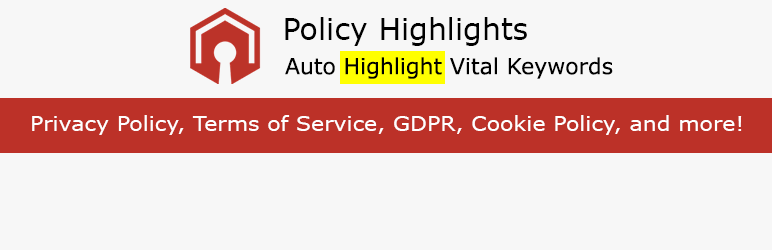
<style>
.page{position:relative;width:772px;height:250px;background:#f7f7f7}
.page>*{position:absolute;margin:0}
.t1{font:30px "Verdana";color:#000000}
.t2{font:22px "Verdana";color:#000000}
.t3{font:20px "Verdana";color:#ffffff;scale:1.1 1}
</style>
<div class="page">
<p class="t1" style="left:285px;top:17px;width:242px;height:29px">Policy Highlights</p>
<p class="t2" style="left:285px;top:57px;width:328px;height:22px">Auto Highlight Vital Keywords</p>
<p class="t3" style="left:32px;top:115px;width:710px;height:20px">Privacy Policy, Terms of Service, GDPR, Cookie Policy, and more!</p>
</div>
